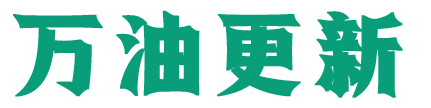
<style>
.page{position:relative;width:431px;height:108px;background:#ffffff}
.page>*{position:absolute;margin:0}
.t1{font:100px "076-SSZhanRenTi";letter-spacing:0.05em;color:#099e79;font-weight:bold}
</style>
<div class="page">
<p class="t1" style="left:13px;top:10px;width:390px;height:88px">万油更新</p>
</div>
